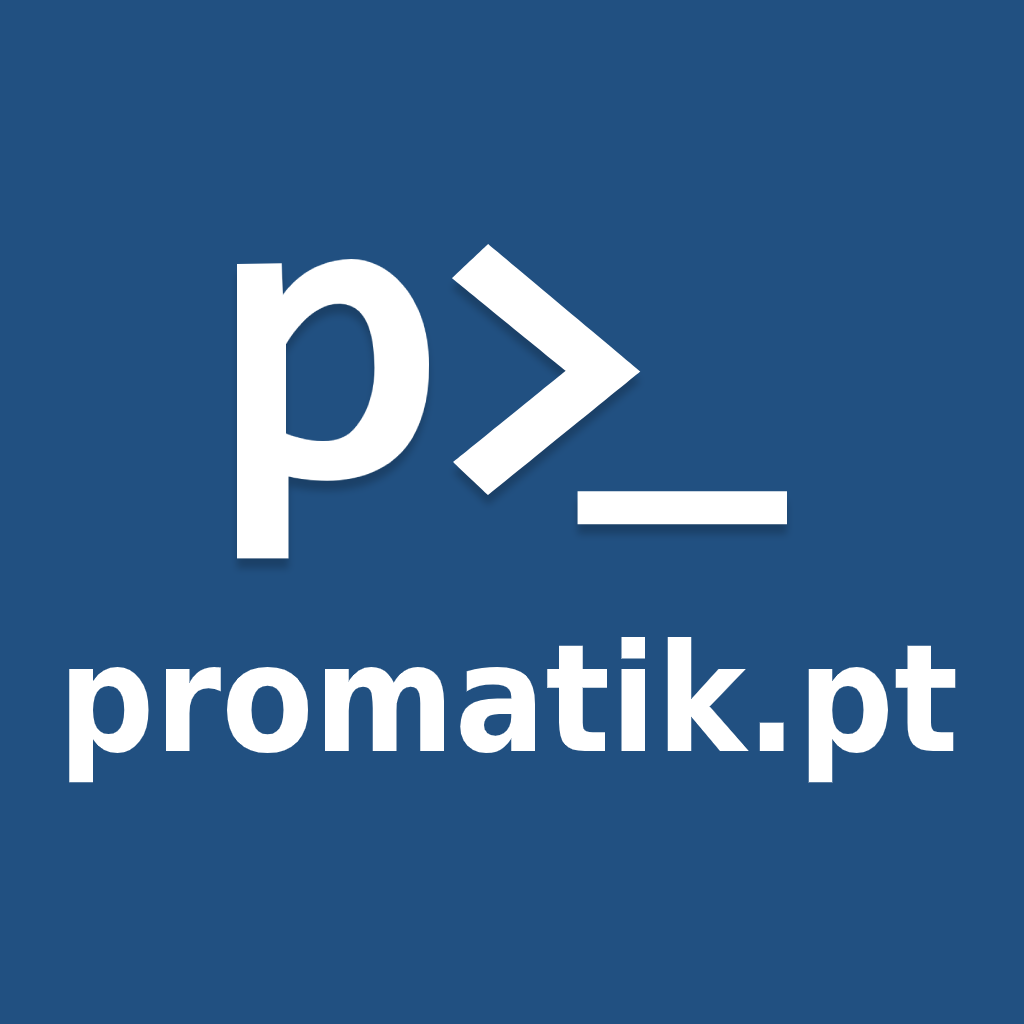
<style>
.page{position:relative;width:1024px;height:1024px;background:#215081}
.page>*{position:absolute;margin:0}
.t1{font:150px "DejaVuSansCondensed-Bold";color:#ffffff}
</style>
<div class="page">
<p class="t1" style="left:69px;top:637px;width:887px;height:146px">promatik.pt</p>
</div>
